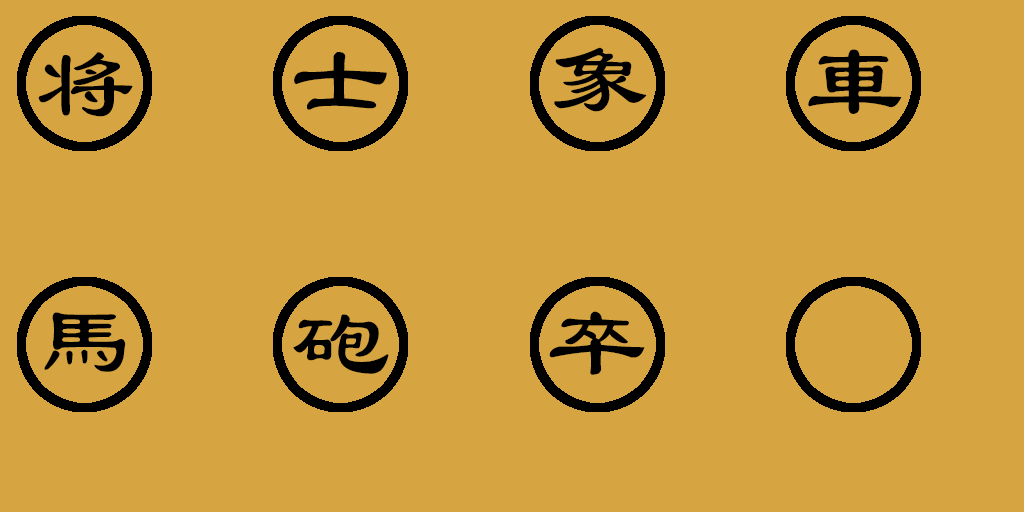
<style>
.page{position:relative;width:1024px;height:512px;background:#d6a440}
.page>*{position:absolute;margin:0}
.t1{font:99px "LiSu";color:#000000}
</style>
<div class="page">
<p class="t1" style="left:38px;top:52px;width:95px;height:65px">将</p>
<p class="t1" style="left:294px;top:52px;width:93px;height:58px">士</p>
<p class="t1" style="left:554px;top:47px;width:93px;height:65px">象</p>
<p class="t1" style="left:808px;top:49px;width:94px;height:65px">車</p>
<p class="t1" style="left:44px;top:312px;width:82px;height:60px">馬</p>
<p class="t1" style="left:293px;top:314px;width:96px;height:60px">砲</p>
<p class="t1" style="left:549px;top:311px;width:96px;height:64px">卒</p>
</div>
